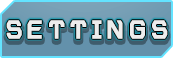
<style>
.page{position:relative;width:173px;height:58px;background:#6391ab}
.page>*{position:absolute;margin:0}
.t1{font:25px "VoyagerGrotesqueBold";letter-spacing:0.2em;color:#ffffff}
</style>
<div class="page">
<p class="t1" style="left:6px;top:20px;width:162px;height:19px">SETTINGS</p>
</div>
